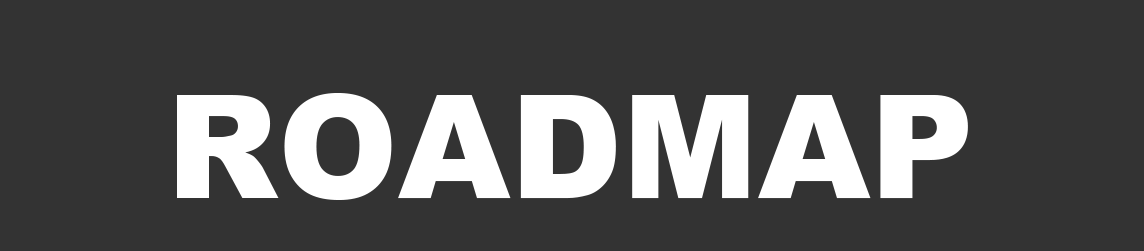
<style>
.page{position:relative;width:1144px;height:251px;background:#333333}
.page>*{position:absolute;margin:0}
.t1{font:144px "Arial-Black";color:#ffffff}
</style>
<div class="page">
<p class="t1" style="left:177px;top:93px;width:791px;height:107px">ROADMAP</p>
</div>
